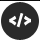
<style>
.page{position:relative;width:40px;height:40px;background:#2a2a2a}
.page>*{position:absolute;margin:0}
.t1{font:18.5px "BerlinSansFB-Bold";letter-spacing:-0.005em;color:#fefefe}
</style>
<div class="page">
<p class="t1" style="left:9px;top:12px;width:22px;height:15px">&lt;/&gt;</p>
</div>
